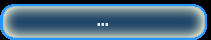
<style>
.page{position:relative;width:211px;height:40px}
.page>*{position:absolute;margin:0}
.t1{font:12px "Arial-Black";color:#ededed}
</style>
<div class="page">
<p class="t1" style="left:97px;top:23px;width:11px;height:3px">...</p>
</div>
